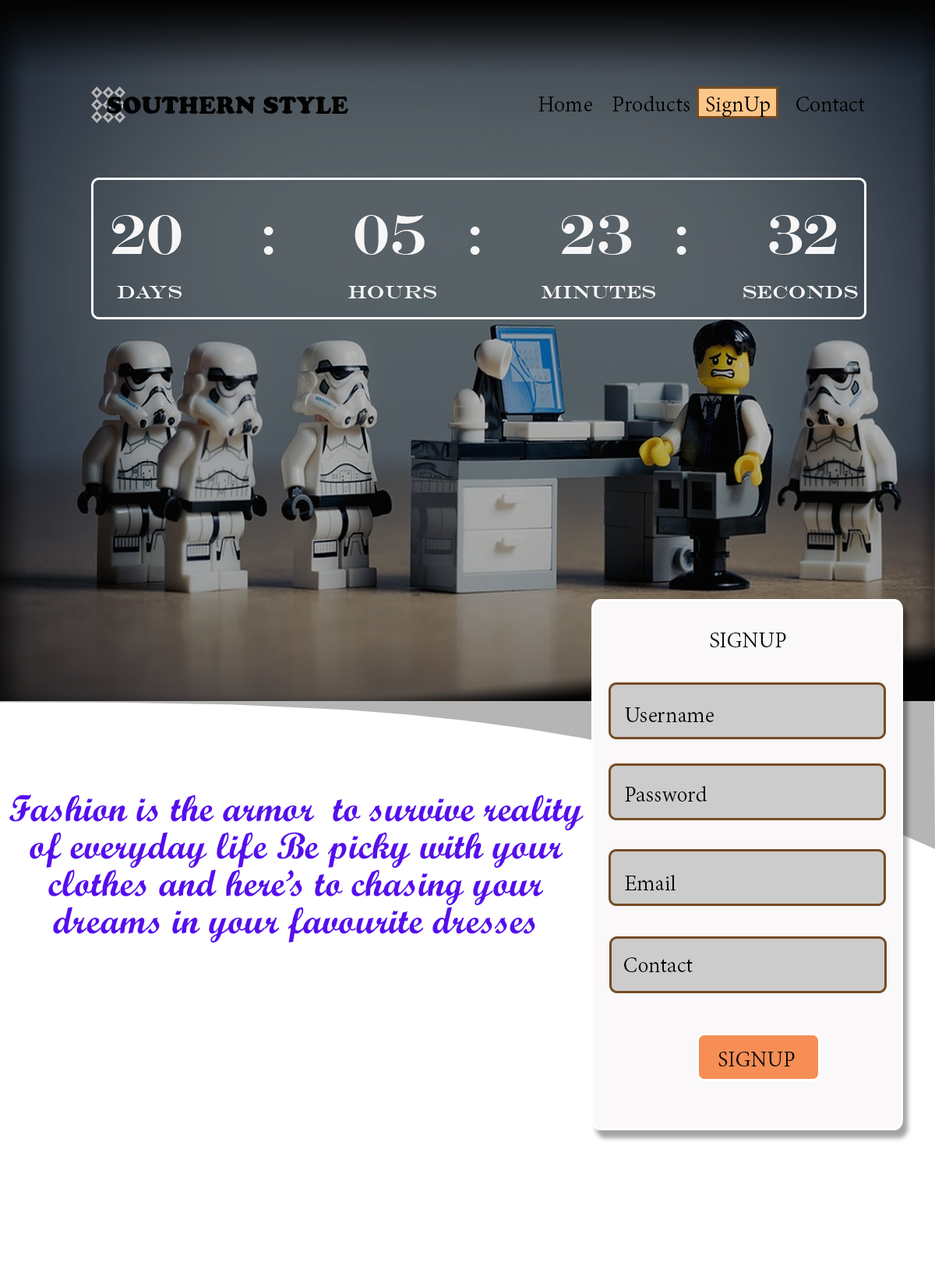
<style>
.page{position:relative;width:935px;height:1276px;background:#ffffff}
.page>*{position:absolute;margin:0}
.t1{font:23.4px "CooperBlackStd";letter-spacing:0.005em;color:#000000}
.t2{font:23.4px "AdobeDevanagari-Regular";letter-spacing:0.005em;color:#020202}
.t3{font:56.1px "EngraversMT";letter-spacing:0.005em;color:#f6f6f6}
.t4{font:18.7px "EngraversMT";letter-spacing:0.005em;color:#f6f6f6}
.t5{font:23.4px "AdobeDevanagari-Regular";letter-spacing:0.005em;color:#0a0a0a}
.t6{font:37.4px/9.4px "ScriptMTBold";letter-spacing:0.005em;color:#570ded}
</style>
<div class="page">
<p class="t1" style="left:107px;top:96px;width:241px;height:18px">SOUTHERN STYLE</p>
<p class="t2" style="left:538px;top:96px;width:327px;height:21px">Home    Products   SignUp     Contact</p>
<p class="t3" style="left:112px;top:215px;width:725px;height:40px">32    :  23    :  05    :    20</p>
<p class="t4" style="left:117px;top:286px;width:741px;height:12px">Days                           Hours                 Minutes              Seconds</p>
<p class="t5" style="left:710px;top:632px;width:76px;height:15px">SIGNUP</p>
<p class="t5" style="left:625px;top:707px;width:88px;height:15px">Username</p>
<p class="t5" style="left:625px;top:786px;width:82px;height:15px">Password</p>
<p class="t6" style="left:9px;top:794px;width:574px;height:148px;text-align:center">Fashion is the armor  to survive reality <br><br><br><br>of everyday life Be picky with your <br><br><br><br>clothes and here’s to chasing your <br><br><br><br>dreams in your favourite dresses</p>
<p class="t5" style="left:625px;top:875px;width:50px;height:15px">Email</p>
<p class="t5" style="left:624px;top:957px;width:68px;height:15px">Contact</p>
<p class="t5" style="left:718px;top:1051px;width:76px;height:15px">SIGNUP</p>
</div>
